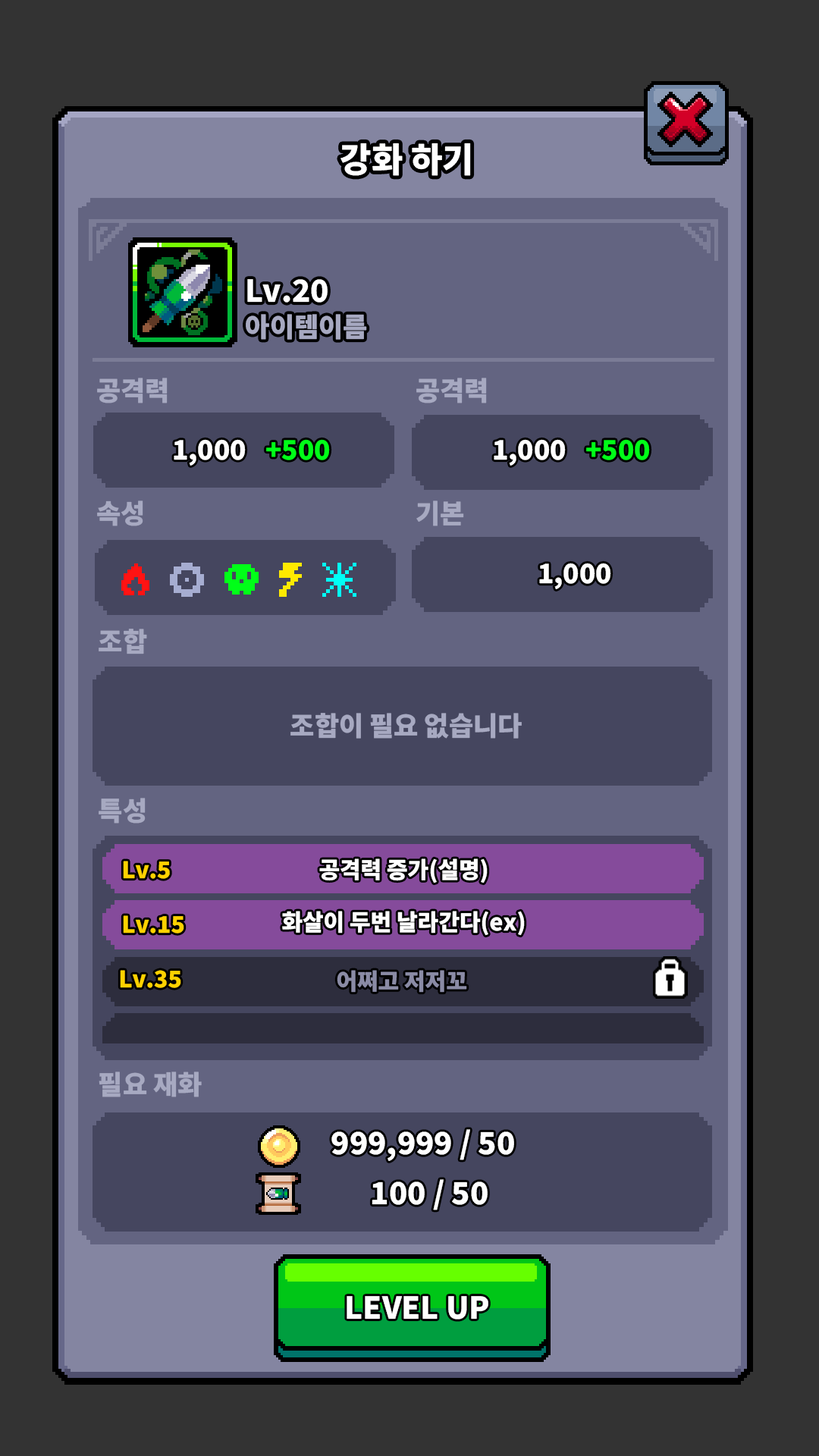
<style>
.page{position:relative;width:819px;height:1456px;background:#333333}
.page>*{position:absolute;margin:0}
.t1{font:34.1px "NotoSansKR-Black";color:#ffffff}
.t2{font:30.3px "NotoSansKR-Black";color:#ffffff}
.t3{font:26.5px "NotoSansKR-Black";color:#a7a9c1}
.t4{font:26.5px "NotoSansKR-Black";color:#ffffff}
.t5{font:26.5px "NotoSansKR-Black";color:#00ff18}
.t6{font:22.7px "NotoSansKR-Black";color:#ffd200}
.t7{font:22.7px "NotoSansKR-Black";color:#ffffff}
.t8{font:22.7px "NotoSansKR-Black";color:#8a8ca5}
</style>
<div class="page">
<p class="t1" style="left:340px;top:143px;width:131px;height:33px">강화 하기</p>
<p class="t2" style="left:247px;top:279px;width:81px;height:24px">Lv.20</p>
<p class="t3" style="left:246px;top:314px;width:121px;height:26px">아이템이름</p>
<p class="t3" style="left:97px;top:378px;width:71px;height:25px">공격력</p>
<p class="t3" style="left:416px;top:378px;width:71px;height:25px">공격력</p>
<p class="t4" style="left:174px;top:439px;width:72px;height:27px">1,000</p>
<p class="t5" style="left:266px;top:439px;width:64px;height:21px">+500</p>
<p class="t4" style="left:494px;top:439px;width:72px;height:27px">1,000</p>
<p class="t5" style="left:586px;top:439px;width:64px;height:21px">+500</p>
<p class="t3" style="left:97px;top:500px;width:46px;height:26px">속성</p>
<p class="t3" style="left:416px;top:500px;width:48px;height:26px">기본</p>
<p class="t4" style="left:539px;top:563px;width:72px;height:26px">1,000</p>
<p class="t3" style="left:99px;top:629px;width:48px;height:25px">조합</p>
<p class="t3" style="left:290px;top:713px;width:232px;height:26px">조합이 필요 없습니다</p>
<p class="t3" style="left:99px;top:798px;width:47px;height:26px">특성</p>
<p class="t6" style="left:123px;top:861px;width:47px;height:18px">Lv.5</p>
<p class="t7" style="left:319px;top:858px;width:169px;height:25px">공격력 증가(설명)</p>
<p class="t6" style="left:123px;top:915px;width:61px;height:18px">Lv.15</p>
<p class="t7" style="left:282px;top:911px;width:243px;height:25px">화살이 두번 날라간다(ex)</p>
<p class="t6" style="left:120px;top:970px;width:61px;height:18px">Lv.35</p>
<p class="t8" style="left:337px;top:970px;width:130px;height:23px">어쩌고 저저꼬</p>
<p class="t3" style="left:99px;top:1072px;width:103px;height:25px">필요 재화</p>
<p class="t2" style="left:331px;top:1129px;width:183px;height:32px">999,999 / 50</p>
<p class="t2" style="left:372px;top:1179px;width:116px;height:31px">100 / 50</p>
<p class="t2" style="left:347px;top:1296px;width:141px;height:23px">LEVEL UP</p>
</div>
